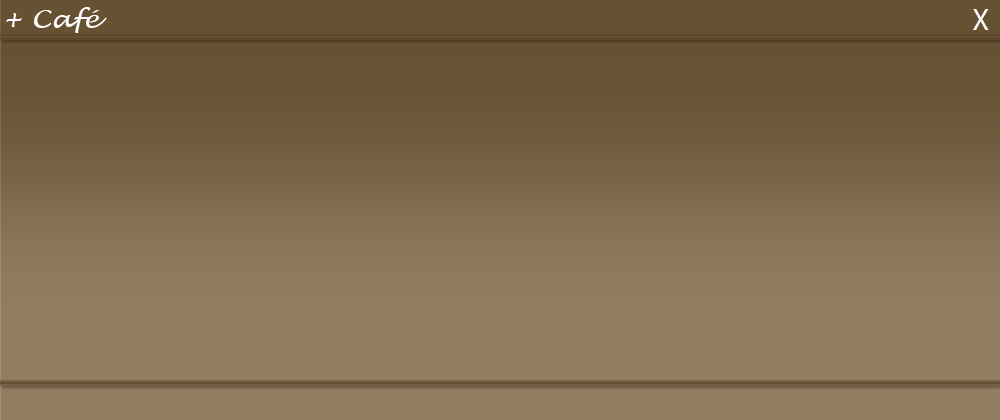
<style>
.page{position:relative;width:1000px;height:420px;background:#937e62}
.page>*{position:absolute;margin:0}
.t1{font:25px "LucidaHandwriting-Italic";color:#fefdfb;scale:1.11 1}
.t2{font:30.1px "MyriadPro-Regular";color:#fefdfb}
</style>
<div class="page">
<p class="t1" style="left:6px;top:7px;width:101px;height:26px">+ Café</p>
<p class="t2" style="left:973px;top:9px;width:16px;height:21px">X</p>
</div>
